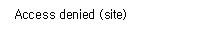
<style>
.page{position:relative;width:200px;height:30px;background:#ffffff}
.page>*{position:absolute;margin:0}
.t1{font:12px "Gulim";letter-spacing:-0.025em;color:#000000}
</style>
<div class="page">
<p class="t1" style="left:15px;top:9px;width:111px;height:11px">Access denied (site)</p>
</div>
